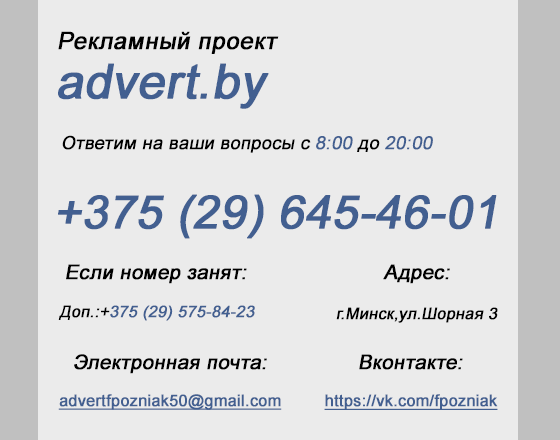
<style>
.page{position:relative;width:560px;height:440px;background:#ebebeb}
.page>*{position:absolute;margin:0}
.t1{font:24px "ArialMT";color:#000000;font-weight:bold;font-style:italic}
.t2{font:48px "ArialMT";color:#425f90;font-weight:bold;font-style:italic}
.t3{font:18px "ArialMT";color:#000000;font-weight:bold;font-style:italic}
.t4{font:18px "ArialMT";color:#425f90;font-weight:bold;font-style:italic}
.t5{font:46px "ArialMT";color:#425f90;font-weight:bold;font-style:italic}
.t6{font:20px "ArialMT";color:#000000;font-weight:bold;font-style:italic}
.t7{font:16px "ArialMT";color:#425f90;font-weight:bold;font-style:italic}
.t8{font:16px "ArialMT";color:#000000;font-weight:bold;font-style:italic}
.t9{font:16px "ArialMT";color:#425f90;font-weight:bold;text-decoration:underline}
</style>
<div class="page">
<p class="t1" style="left:58px;top:31px;width:221px;height:23px">Рекламный проект</p>
<p class="t2" style="left:58px;top:63px;width:211px;height:46px">advert.by</p>
<p class="t3" style="left:62px;top:135px;width:371px;height:18px">Ответим на ваши вопросы с <span class="t4">8:00</span> до <span class="t4">20:00</span></p>
<p class="t5" style="left:58px;top:194px;width:439px;height:45px">+375 (29) 645-46-01</p>
<p class="t6" style="left:66px;top:264px;width:181px;height:20px">Если номер занят:</p>
<p class="t6" style="left:383px;top:264px;width:67px;height:20px">Адрес:</p>
<p class="t7" style="left:58px;top:305px;width:197px;height:16px"><span class="t8">Доп.:+</span>375 (29) 575-84-23</p>
<p class="t8" style="left:336px;top:307px;width:162px;height:16px">г.Минск,ул.Шорная 3</p>
<p class="t6" style="left:74px;top:354px;width:193px;height:20px">Электронная почта:</p>
<p class="t6" style="left:359px;top:354px;width:104px;height:16px">Вконтакте:</p>
<p class="t9" style="left:58px;top:394px;width:224px;height:16px">advertfpozniak50@gmail.com</p>
<p class="t9" style="left:324px;top:394px;width:174px;height:16px">https://vk.com/fpozniak</p>
</div>
